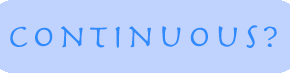
<style>
.page{position:relative;width:290px;height:73px;background:#c0d3ff}
.page>*{position:absolute;margin:0}
.t1{font:34.4px "Herculanum";letter-spacing:0.065em;color:#308bfc;scale:1.12 1}
</style>
<div class="page">
<p class="t1" style="left:10px;top:25px;width:267px;height:23px">continuous?</p>
</div>
